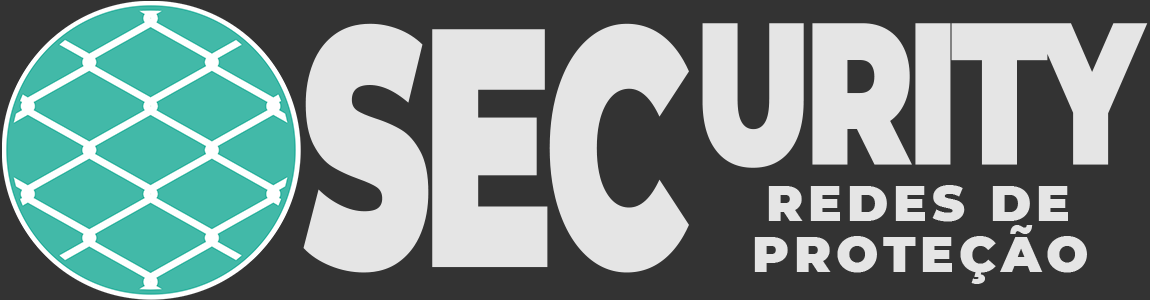
<style>
.page{position:relative;width:1150px;height:300px;background:#333333}
.page>*{position:absolute;margin:0}
.t1{font:339.6px "Montserrat-Black";letter-spacing:-0.05em;color:#e5e5e5;text-transform:uppercase;scale:0.58 1}
.t2{font:201.8px "Montserrat-Black";letter-spacing:-0.05em;color:#e5e5e5;text-transform:uppercase;scale:0.73 1}
.t3{font:50px "Montserrat-Black";letter-spacing:0.1em;color:#e5e5e5;text-transform:uppercase}
</style>
<div class="page">
<p class="t1" style="left:303px;top:23px;width:386px;height:250px">SEC</p>
<p class="t2" style="left:702px;top:23px;width:446px;height:145px">URITY</p>
<p class="t3" style="left:768px;top:185px;width:300px;height:37px">REDES DE</p>
<p class="t3" style="left:754px;top:225px;width:333px;height:59px">PROTEÇÃO</p>
</div>
